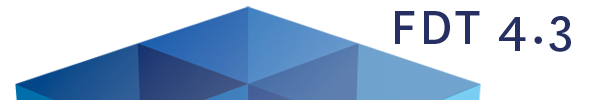
<style>
.page{position:relative;width:600px;height:100px;background:#ffffff}
.page>*{position:absolute;margin:0}
.t1{font:56px "National-Regular";letter-spacing:0.05em;color:#252f61}
</style>
<div class="page">
<p class="t1" style="left:395px;top:11px;width:176px;height:41px">FDT 4.3</p>
</div>
